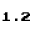
<style>
.page{position:relative;width:32px;height:32px;background:#ffffff}
.page>*{position:absolute;margin:0}
.t1{font:10px "PressStartK";color:#000000}
</style>
<div class="page">
<p class="t1" style="left:2px;top:12px;width:28px;height:9px">1.2</p>
</div>
